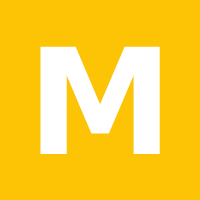
<style>
.page{position:relative;width:200px;height:200px;background:#fcc404}
.page>*{position:absolute;margin:0}
.t1{font:147px "DejaVuSans-Bold";color:#ffffff}
</style>
<div class="page">
<p class="t1" style="left:40px;top:46px;width:120px;height:108px">M</p>
</div>
